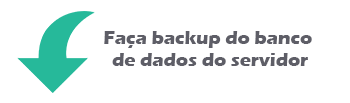
<style>
.page{position:relative;width:350px;height:103px;background:#ffffff}
.page>*{position:absolute;margin:0}
.t1{font:18.7px "ErasITC-Bold";color:#5e5e67}
</style>
<div class="page">
<p class="t1" style="left:104px;top:31px;width:208px;height:35px;text-align:center">Faça backup do banco <br>de dados do servidor</p>
</div>
